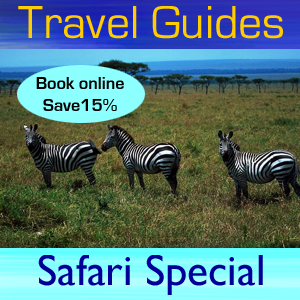
<style>
.page{position:relative;width:300px;height:300px}
.page>*{position:absolute;margin:0}
.t1{font:48px "EurostileRegular";color:#ffcc00}
.t2{font:44px "GillSansMT";color:#000099}
</style>
<div class="page">
<p class="t1" style="left:18px;top:6px;width:265px;height:33px">Travel Guides</p>
<p class="t2" style="left:38px;top:255px;width:225px;height:40px">Safari Special</p>
</div>
